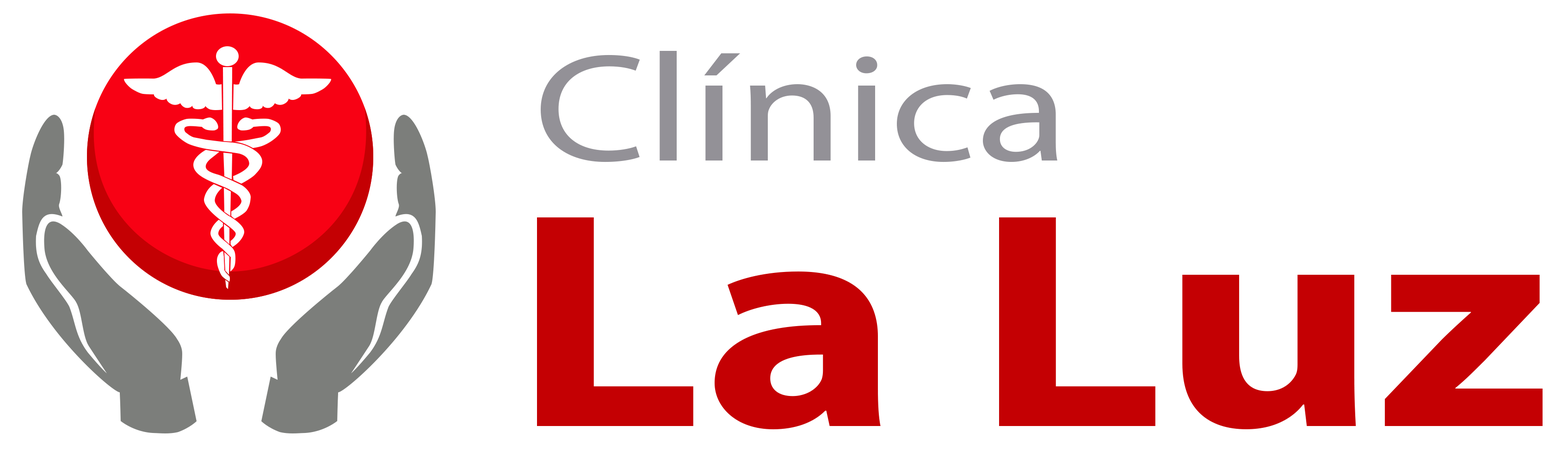
<style>
.page{position:relative;width:1568px;height:451px;background:#ffffff}
.page>*{position:absolute;margin:0}
.t1{font:154.6px "MyriadPro-Regular";color:#939197;scale:1.25 1}
.t2{font:309.7px "MyriadPro-Bold";color:#c40003;scale:1.2 1}
</style>
<div class="page">
<p class="t1" style="left:541px;top:51px;width:516px;height:111px">Clínica</p>
<p class="t2" style="left:537px;top:217px;width:1006px;height:213px">La Luz</p>
</div>
